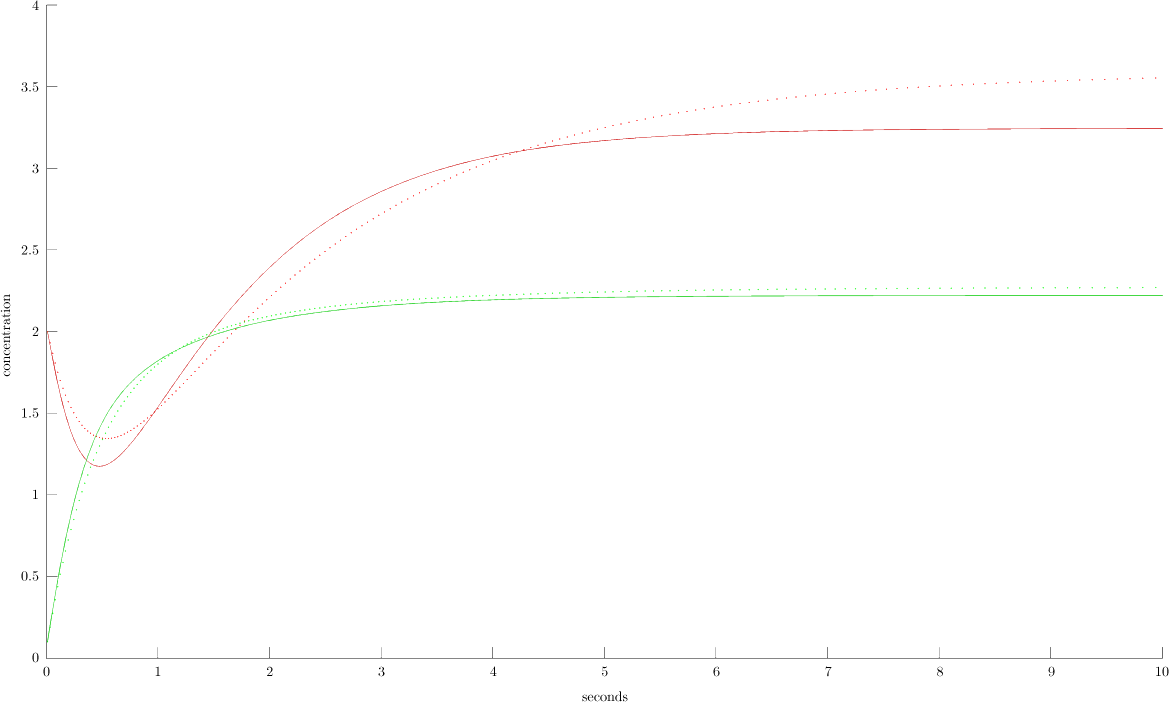
<style>
.page{position:relative;width:1170px;height:702px;background:#ffffff}
.page>*{position:absolute;margin:0}
.t1{font:14px/16.3px "CMUSerif-Roman";color:#000000}
.t2{font:14px "CMUSerif-Roman";color:#000000}
.t3{font:14px "CMUSerif-Roman";letter-spacing:0.377em;color:#000000}
</style>
<div class="page">
<p class="t1" style="left:21px;top:0px;width:18px;height:663px;text-align:right">4<br><br><br><br><br>3.5<br><br><br><br><br>3<br><br><br><br><br>2.5<br><br><br><br><br>2<br><br><br><br><br>1.5<br><br><br><br><br>1<br><br><br><br><br>0.5<br><br><br><br><br>0</p>
<p class="t2" style="left:0px;top:294px;width:11px;height:83px;rotate:-90deg">concentration</p>
<p class="t3" style="left:43px;top:666px;width:1012px;height:11px">0          1          2          3          4          5          6          7          8          9</p>
<p class="t2" style="left:1156px;top:666px;width:13px;height:11px">10</p>
<p class="t2" style="left:582px;top:691px;width:46px;height:11px">seconds</p>
</div>
